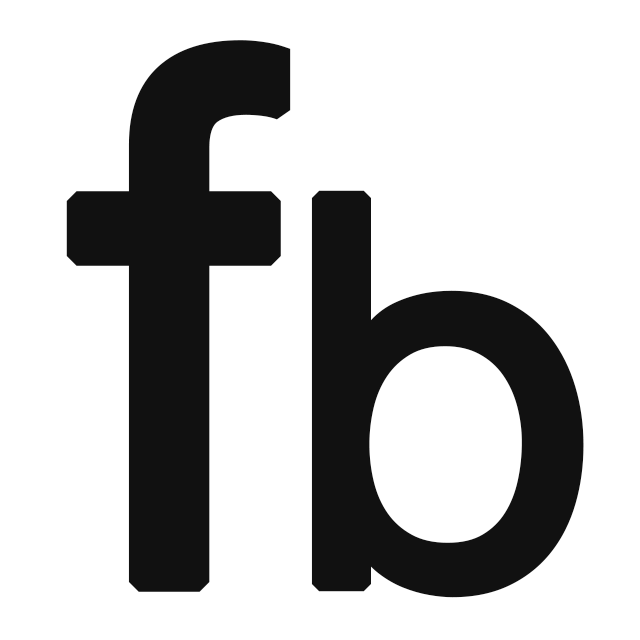
<style>
.page{position:relative;width:640px;height:640px;background:#ffffff}
.page>*{position:absolute;margin:0}
.t1{font:737px "HelveticaNeue";letter-spacing:-0.02em;color:#111111;font-weight:bold;scale:0.97 1}
.t2{font:541px "HelveticaNeue";letter-spacing:-0.02em;color:#111111;font-weight:bold;scale:0.97 1}
</style>
<div class="page">
<p class="t1" style="left:66px;top:40px;width:518px;height:558px">f<span class="t2">b</span></p>
</div>
